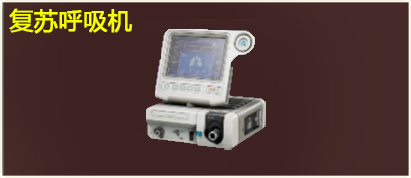
<style>
.page{position:relative;width:411px;height:178px}
.page>*{position:absolute;margin:0}
.t1{font:24px "MicrosoftYaHeiUI";color:#f4ff00;font-weight:bold}
</style>
<div class="page">
<p class="t1" style="left:9px;top:8px;width:124px;height:26px">复苏呼吸机</p>
</div>
